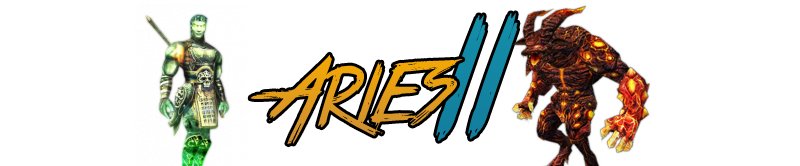
<style>
.page{position:relative;width:800px;height:166px;background:#ffffff}
.page>*{position:absolute;margin:0}
.t1{font:118.2px "TrueLies";color:#1386a2}
.t2{font:83.6px "TrueLies";color:#e59e17}
</style>
<div class="page">
<p class="t1" style="left:436px;top:13px;width:82px;height:128px;rotate:-3deg">II</p>
<p class="t2" style="left:250px;top:54px;width:213px;height:91px;rotate:-3deg">Aries</p>
</div>
